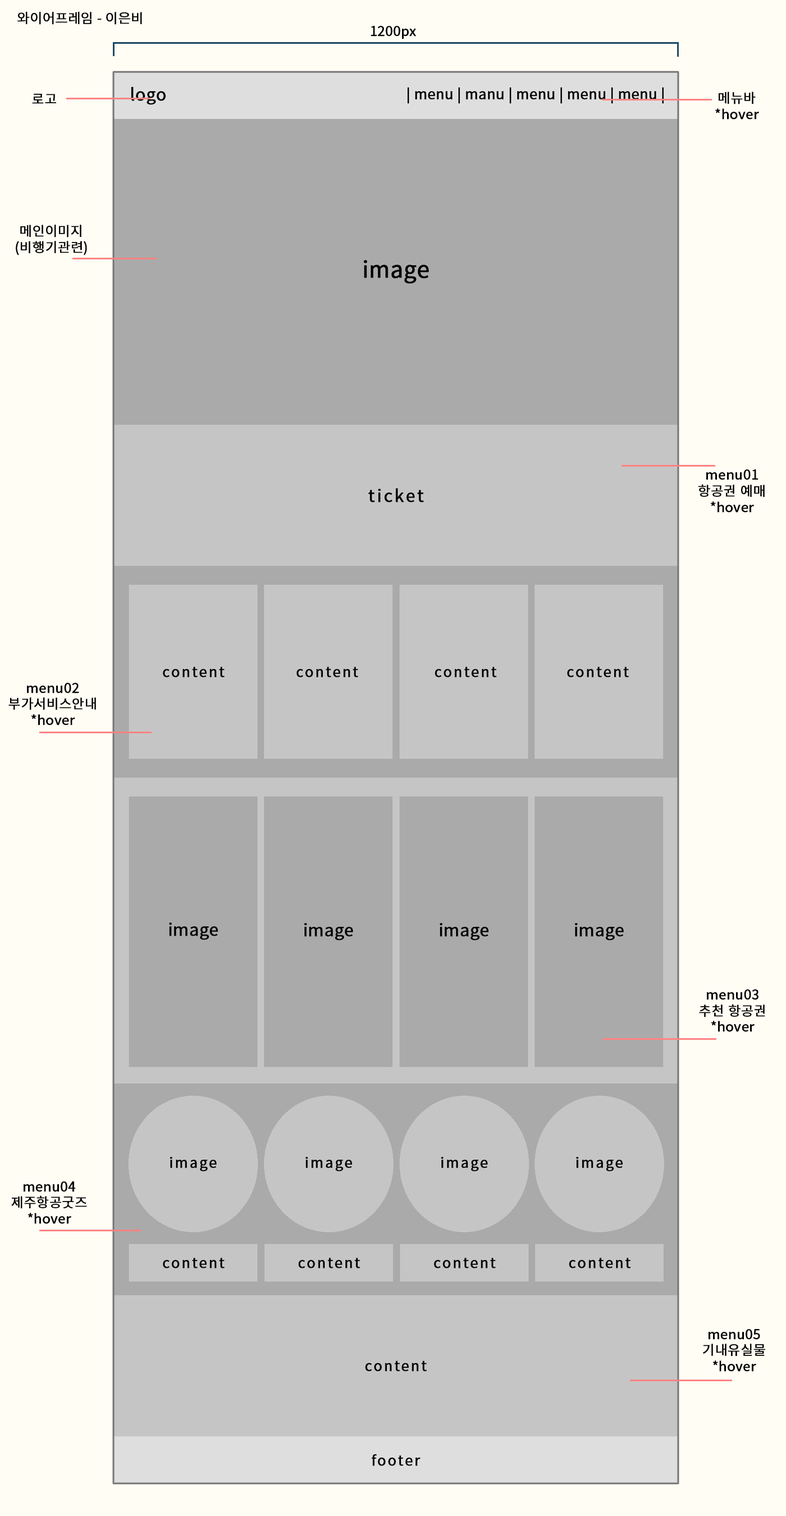
<style>
.page{position:relative;width:786px;height:1516px;background:#aaaaaa}
.page>*{position:absolute;margin:0}
.t1{font:13.5px "NotoSansKR-Regular";color:#000000;font-weight:bold}
</style>
<div class="page">
<p class="t1" style="left:17px;top:12px;width:125px;height:13px">와이어프레임 - 이은비</p>
<p class="t1" style="left:371px;top:26px;width:45px;height:13px">1200px</p>
<p class="t1" style="left:32px;top:94px;width:24px;height:10px">로고</p>
<p class="t1" style="left:716px;top:92px;width:43px;height:28px;text-align:center">메뉴바<br>*hover</p>
<p class="t1" style="left:16px;top:225px;width:71px;height:31px;text-align:center">메인이미지<br>(비행기관련)</p>
<p class="t1" style="left:699px;top:470px;width:66px;height:43px;text-align:center">menu01<br>항공권 예매<br>*hover</p>
<p class="t1" style="left:8px;top:683px;width:88px;height:43px;text-align:center">menu02<br>부가서비스안내<br>*hover</p>
<p class="t1" style="left:699px;top:990px;width:67px;height:42px;text-align:center">menu03<br>추천 항공권<br>*hover</p>
<p class="t1" style="left:11px;top:1182px;width:76px;height:42px;text-align:center">menu04<br>제주항공굿즈<br>*hover</p>
<p class="t1" style="left:703px;top:1329px;width:63px;height:43px;text-align:center">menu05<br>기내유실물<br>*hover</p>
</div>
